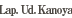
<style>
.page{position:relative;width:72px;height:18px;background:#ffffff}
.page>*{position:absolute;margin:0}
.t1{font:12px "RyuminPro-ExBold";letter-spacing:-0.08em;color:#4c4843;scale:0.9 1}
</style>
<div class="page">
<p class="t1" style="left:0px;top:5px;width:74px;height:11px">Lap. Ud. Kanoya</p>
</div>
